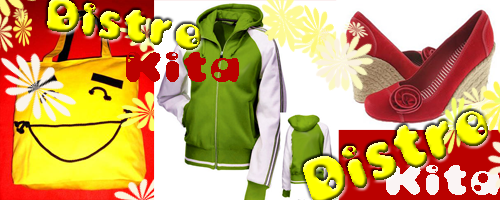
<style>
.page{position:relative;width:500px;height:200px}
.page>*{position:absolute;margin:0}
.t1{font:41.6px "Bambina";scale:0.88 1}
.t2{font:37.5px "Bambina";color:#ba0100}
.t3{font:37.5px "Bambina";color:#faf4f4}
</style>
<div class="page">
<p class="t1" style="left:47px;top:0px;width:154px;height:50px;rotate:8deg">Distro</p>
<p class="t2" style="left:126px;top:52px;width:113px;height:30px">Kita</p>
<p class="t3" style="left:386px;top:165px;width:113px;height:30px">Kita</p>
</div>
